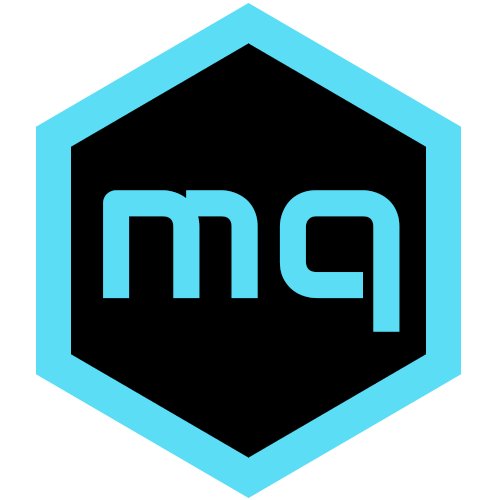
<style>
.page{position:relative;width:500px;height:500px;background:#ffffff}
.page>*{position:absolute;margin:0}
.t1{font:204.5px "Audiowide-Regular";color:#5adef5}
</style>
<div class="page">
<p class="t1" style="left:103px;top:190px;width:297px;height:142px">mq</p>
</div>
